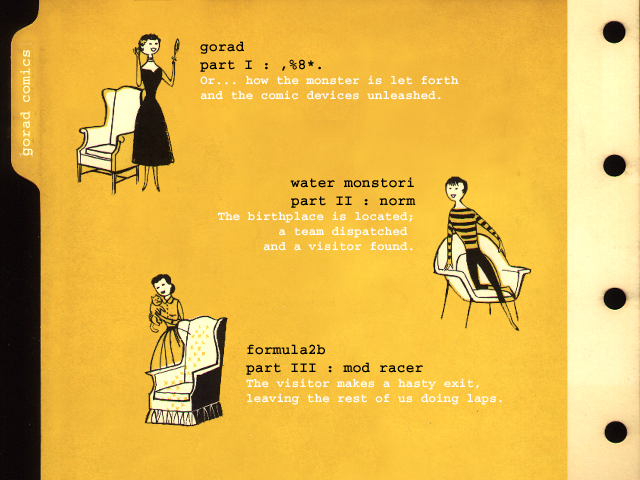
<style>
.page{position:relative;width:640px;height:480px}
.page>*{position:absolute;margin:0}
.t1{font:12.7px "Courier-Bold";color:#ffffff}
.t2{font:14.8px "Courier-Bold";color:#000000}
.t3{font:14.8px "Courier-Bold";color:#ffffcd}
</style>
<div class="page">
<p class="t1" style="left:200px;top:41px;width:259px;height:59px"><span class="t2">gorad<br>part I : ,%8*.<br></span>Or... how the monster is let forth <br>and the comic devices unleashed.</p>
<p class="t3" style="left:20px;top:50px;width:13px;height:106px;rotate:-90deg">gorad comics</p>
<p class="t1" style="left:218px;top:177px;width:198px;height:74px;text-align:right"><span class="t2">water monstori<br>part II : norm<br></span>The birthplace is located;<br>a team dispatched <br>and a visitor found.</p>
<p class="t1" style="left:246px;top:344px;width:256px;height:61px"><span class="t2">formula2b <br>part III : mod racer<br></span>The visitor makes a hasty exit, <br>leaving the rest of us doing laps.</p>
</div>
